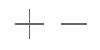
<style>
.page{position:relative;width:100px;height:50px;background:#ffffff}
.page>*{position:absolute;margin:0}
.t1{font:94px "Raleway-Thin";color:#666666}
</style>
<div class="page">
<p class="t1" style="left:15px;top:9px;width:29px;height:30px">+</p>
</div>
